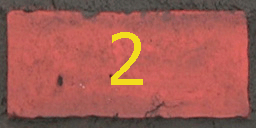
<style>
.page{position:relative;width:256px;height:128px}
.page>*{position:absolute;margin:0}
.t1{font:72px "Tahoma";color:#f3dc1e}
</style>
<div class="page">
<p class="t1" style="left:111px;top:32px;width:32px;height:53px">2</p>
</div>
